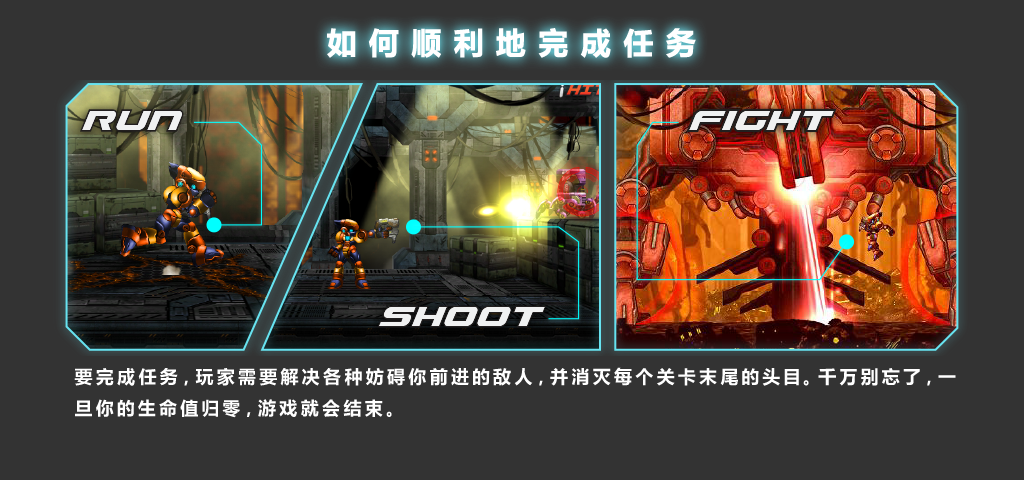
<style>
.page{position:relative;width:1024px;height:480px;background:#333333}
.page>*{position:absolute;margin:0}
.t1{font:30px "MicrosoftYaHei-Bold";letter-spacing:0.4em;color:#ffffff;font-weight:bold}
.t2{font:18px "MicrosoftYaHei-Bold";letter-spacing:0.2em;color:#ffffff}
</style>
<div class="page">
<p class="t1" style="left:327px;top:28px;width:369px;height:30px">如何顺利地完成任务</p>
<p class="t2" style="left:74px;top:367px;width:882px;height:51px">要完成任务，玩家需要解决各种妨碍你前进的敌人，并消灭每个关卡末尾的头目。千万别忘了，一<br>旦你的生命值归零，游戏就会结束。</p>
</div>
